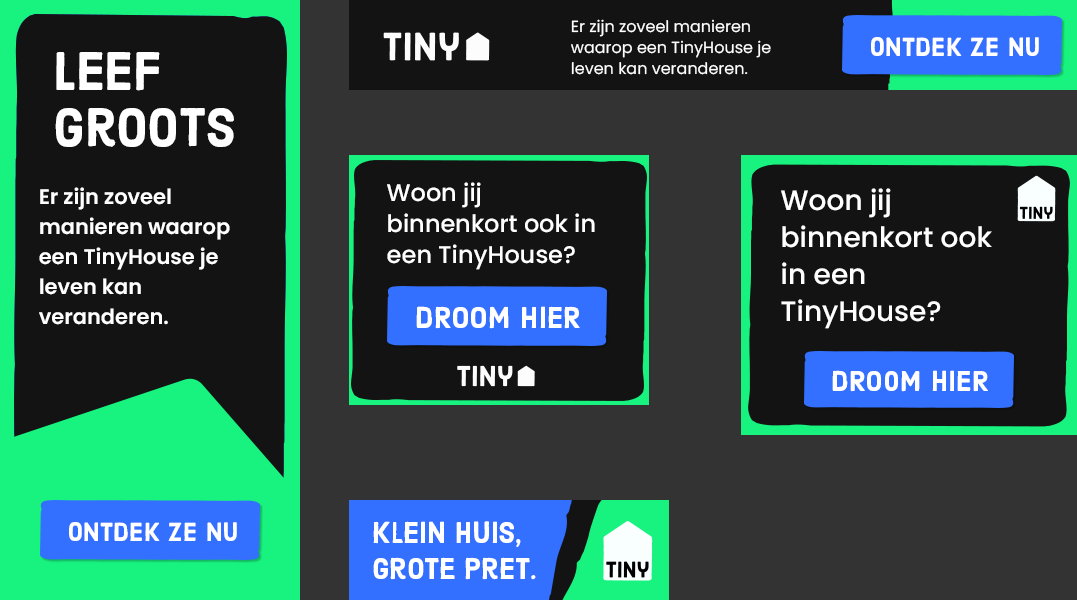
<style>
.page{position:relative;width:1077px;height:600px;background:#131313}
.page>*{position:absolute;margin:0}
.t1{font:16px/21px "Poppins-Regular";color:#ffffff}
.t2{font:26px "Harman-Sans";letter-spacing:0.02em;color:#ffffff}
.t3{font:54px/56px "Harman-Sans";color:#ffffff}
.t4{font:24px/31px "Poppins-Medium";color:#ffffff}
.t5{font:21px/30px "Poppins-SemiBold";color:#ffffff}
.t6{font:28px/37px "Poppins-Medium";color:#ffffff}
.t7{font:30px "Harman-Sans";letter-spacing:0.02em;color:#ffffff}
.t8{font:28.5px "Harman-Sans";letter-spacing:0.02em;color:#ffffff}
.t9{font:30px/36px "Harman-Sans";color:#ffffff}
</style>
<div class="page">
<p class="t1" style="left:571px;top:19px;width:200px;height:56px">Er zijn zoveel manieren waarop een TinyHouse je leven kan veranderen.</p>
<p class="t2" style="left:871px;top:37px;width:168px;height:20px">Ontdek ze nu</p>
<p class="t3" style="left:55px;top:52px;width:179px;height:95px">Leef<br>Groots</p>
<p class="t4" style="left:387px;top:182px;width:208px;height:88px">Woon jij binnenkort ook in een TinyHouse?</p>
<p class="t5" style="left:39px;top:187px;width:191px;height:138px">Er zijn zoveel manieren waarop een TinyHouse je leven kan veranderen.</p>
<p class="t6" style="left:781px;top:188px;width:211px;height:141px">Woon jij binnenkort ook in een TinyHouse?</p>
<p class="t7" style="left:416px;top:306px;width:164px;height:23px">DROOM HIER</p>
<p class="t8" style="left:832px;top:370px;width:156px;height:22px">DROOM HIER</p>
<p class="t9" style="left:373px;top:521px;width:163px;height:59px">Klein huis,<br>grote pret.</p>
<p class="t2" style="left:69px;top:522px;width:168px;height:20px">Ontdek ze nu</p>
</div>
